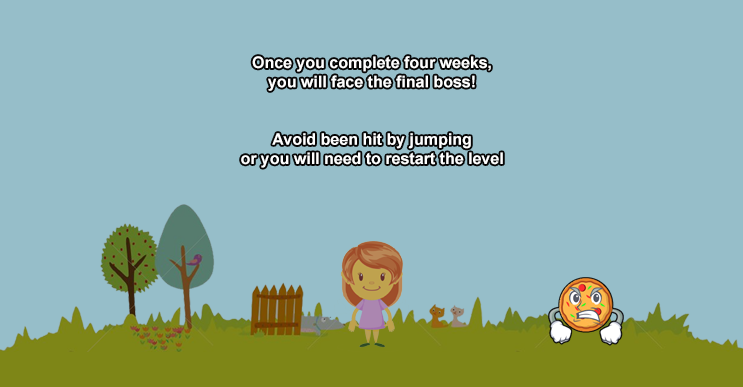
<style>
.page{position:relative;width:743px;height:387px;background:#96bec9}
.page>*{position:absolute;margin:0}
.t1{font:16px "Arial-BoldMT";color:#ffffff}
</style>
<div class="page">
<p class="t1" style="left:241px;top:56px;width:262px;height:112px;text-align:center">Once you complete four weeks,<br>you will face the final boss!<br><br><br>Avoid been hit by jumping<br>or you will need to restart the level</p>
</div>
